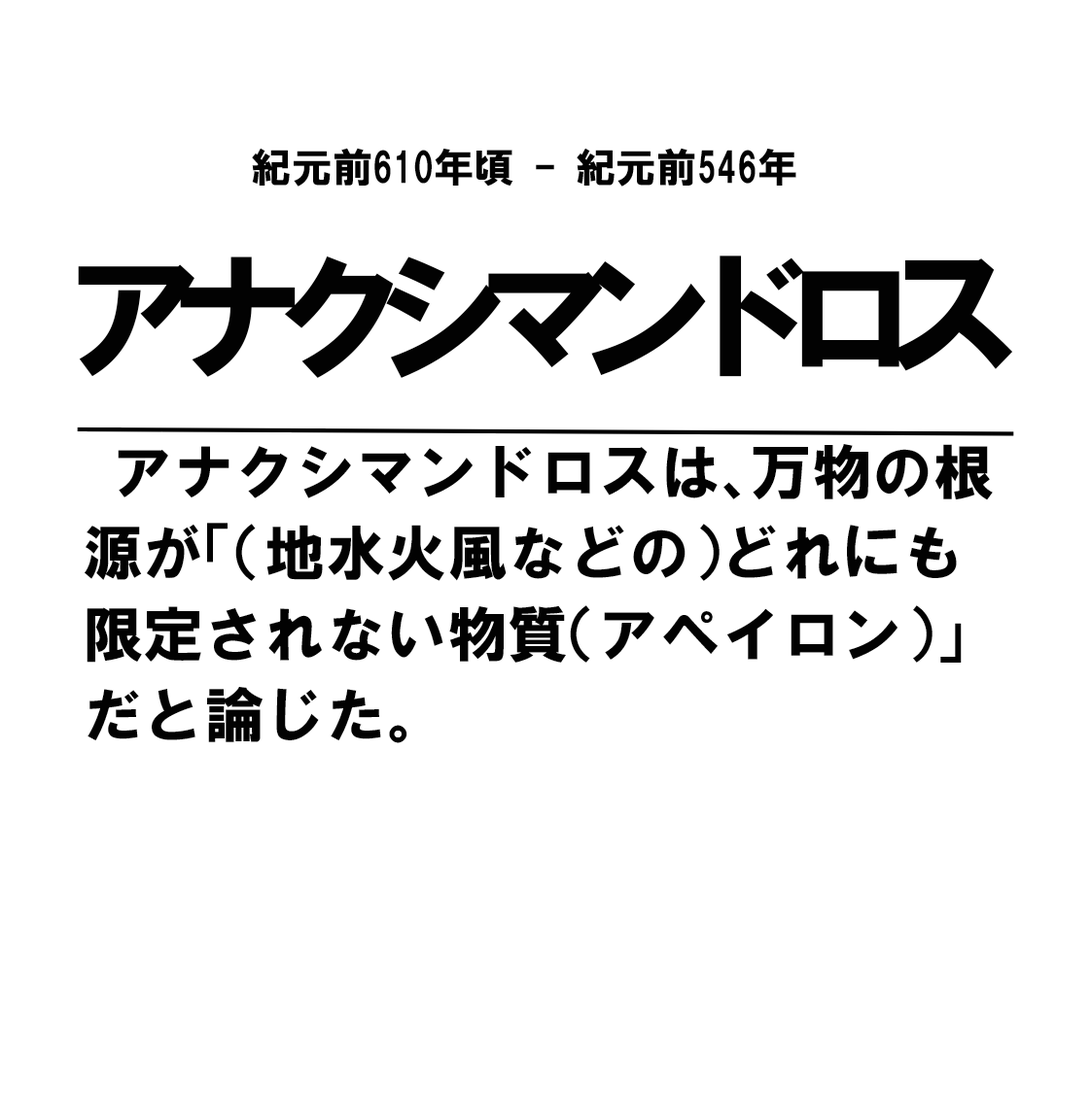
<style>
.page{position:relative;width:1091px;height:1093px;background:#ffffff}
.page>*{position:absolute;margin:0}
.t1{font:40.5px "HGSoeiKakugothicUB";color:#020202}
.t2{font:141.7px "HGSoeiKakugothicUB";letter-spacing:-0.28em;color:#020202}
.t3{font:60.7px/81px "HGSoeiKakugothicUB";color:#020202}
</style>
<div class="page">
<p class="t1" style="left:252px;top:148px;width:544px;height:39px">紀元前610年頃 - 紀元前546年</p>
<p class="t2" style="left:78px;top:256px;width:935px;height:122px">アナクシマンドロス</p>
<p class="t3" style="left:85px;top:444px;width:907px;height:300px">アナクシマンドロスは、万物の根源が「（地水火風などの）どれにも限定されない物質（アペイロン）」だと論じた。</p>
</div>
